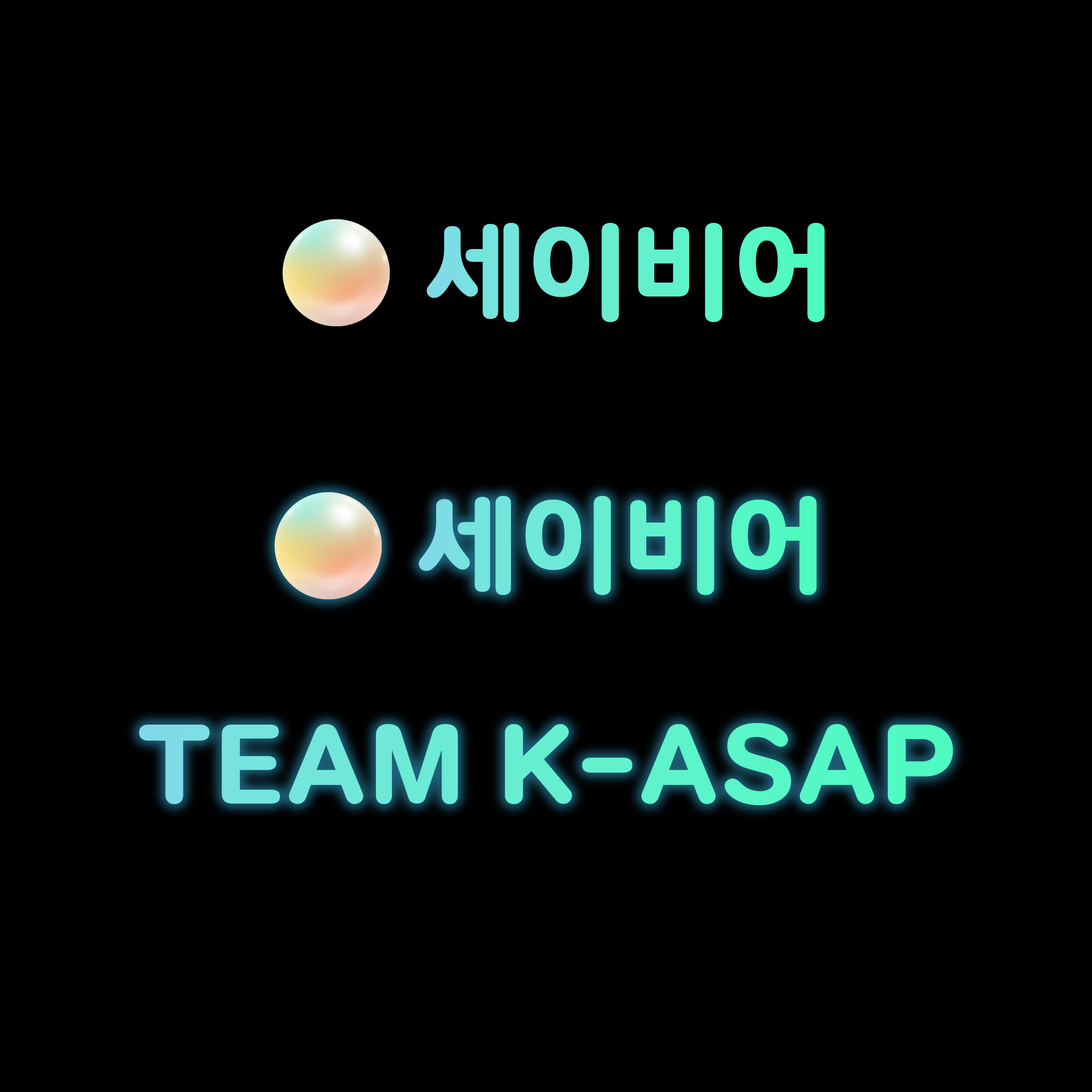
<style>
.page{position:relative;width:1092px;height:1092px;background:#000000}
.page>*{position:absolute;margin:0}
.t1{font:106.6px "TmoneyRoundWind-ExtraBold";color:#66eed1}
</style>
<div class="page">
<p class="t1" style="left:427px;top:223px;width:398px;height:99px">세이비어</p>
<p class="t1" style="left:139px;top:723px;width:814px;height:82px">TEAM K-ASAP</p>
</div>
